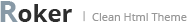
<style>
.page{position:relative;width:189px;height:22px;background:#ffffff}
.page>*{position:absolute;margin:0}
.t1{font:24px "OpenSans-Bold";color:#2d2d2d}
.t2{font:30px "OpenSans-Bold";color:#8899a6}
.t3{font:11px "OpenSans";color:#989898}
</style>
<div class="page">
<p class="t1" style="left:0px;top:1px;width:72px;height:21px"><span class="t2">R</span>oker</p>
<p class="t3" style="left:92px;top:13px;width:95px;height:8px">Clean Html Theme</p>
</div>
